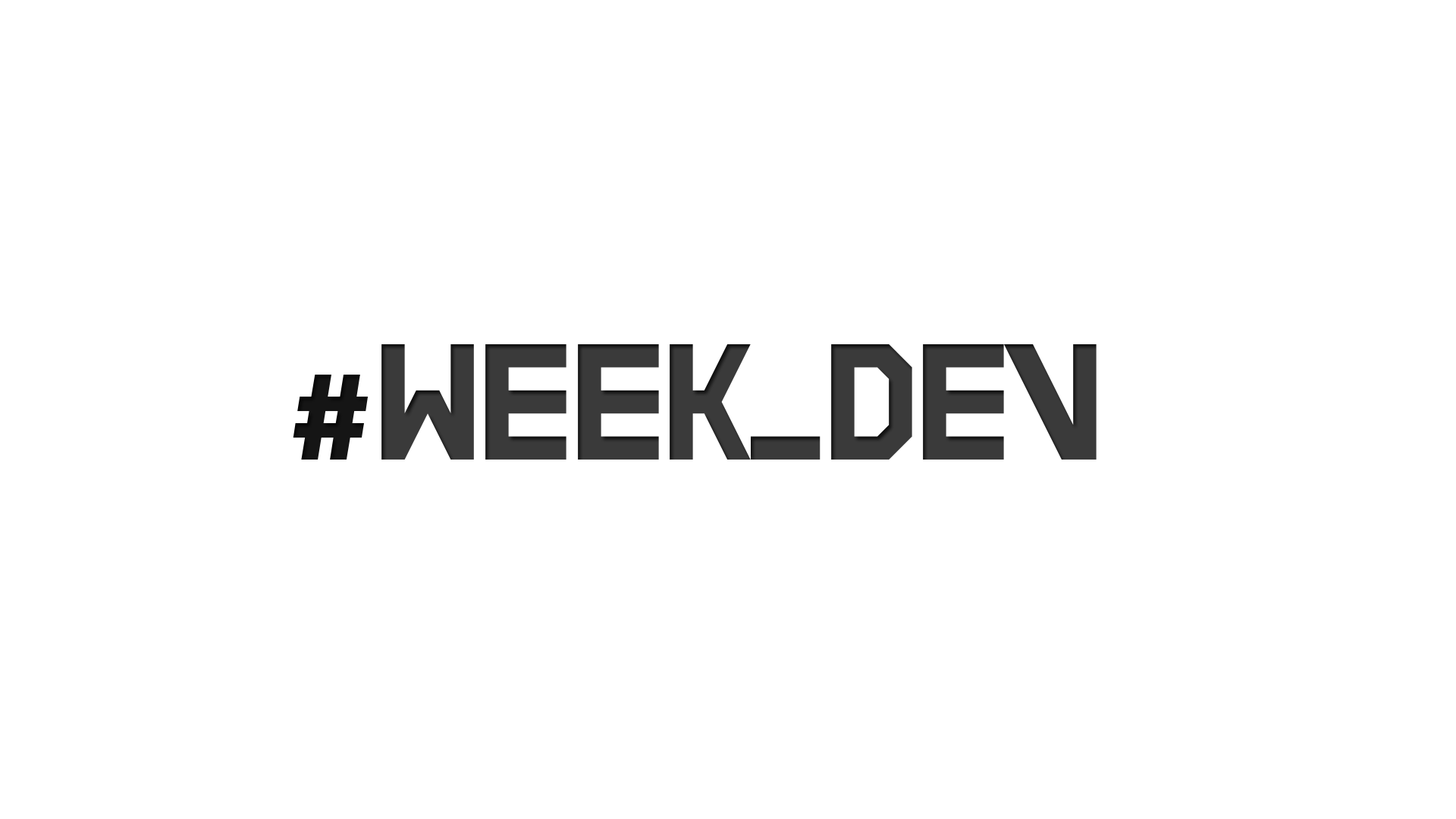
<style>
.page{position:relative;width:1456px;height:819px;background:#ffffff}
.page>*{position:absolute;margin:0}
.t1{font:115.3px "soviet-font";color:#3a3a3a}
.t2{font:115.3px "New_Zelek";color:#151515}
</style>
<div class="page">
<p class="t1" style="left:293px;top:344px;width:804px;height:116px"><span class="t2">#</span>week_dev</p>
</div>
